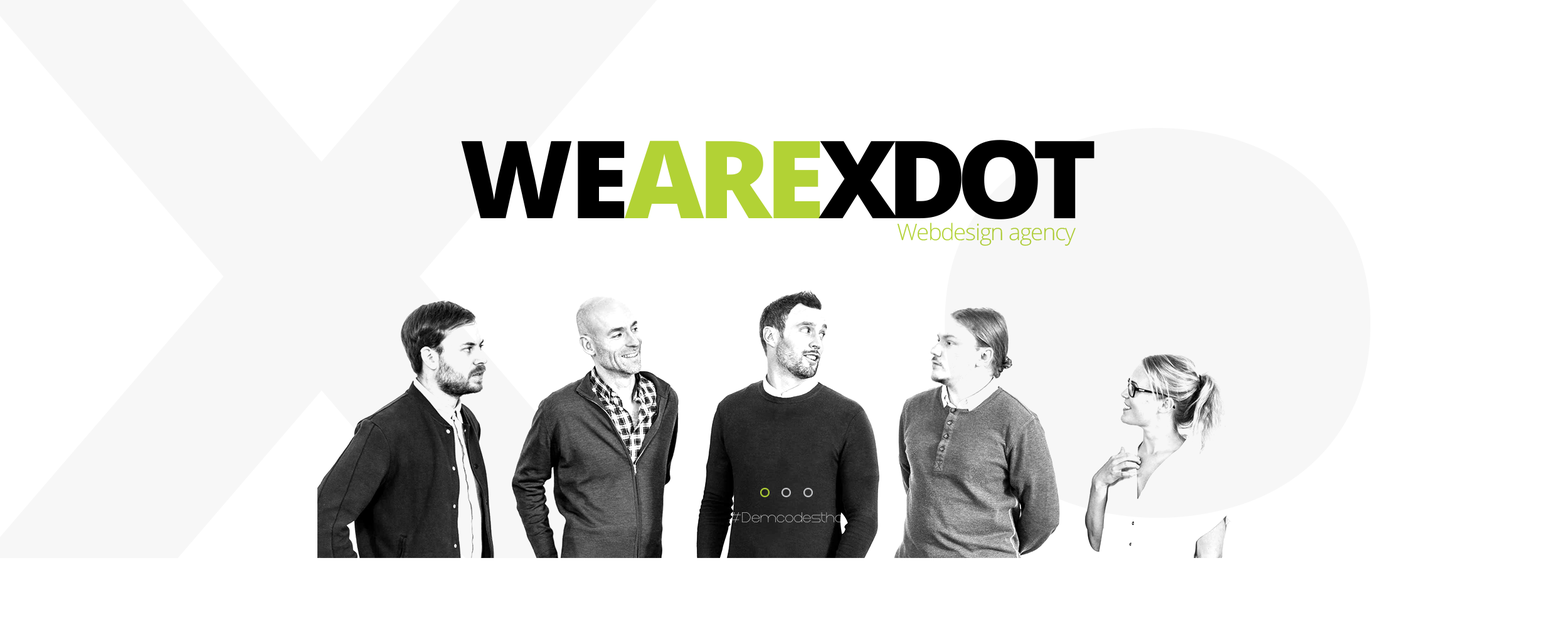
<style>
.page{position:relative;width:1568px;height:627px;background:#ffffff}
.page>*{position:absolute;margin:0}
.t1{font:107.6px "OpenSans-Extrabold";letter-spacing:-0.1em;color:#000000}
.t2{font:107.6px "OpenSans-Extrabold";letter-spacing:-0.04em;color:#000000}
.t3{font:107.6px "OpenSans-Extrabold";letter-spacing:-0.06em;color:#b2d235}
.t4{font:22.7px "OpenSans-Light";letter-spacing:-0.04em;color:#b2d235}
</style>
<div class="page">
<p class="t1" style="left:461px;top:140px;width:633px;height:80px"><span class="t2">WE</span><span class="t3">ARE</span>XDOT</p>
<p class="t4" style="left:897px;top:223px;width:179px;height:23px">Webdesign agency</p>
</div>
